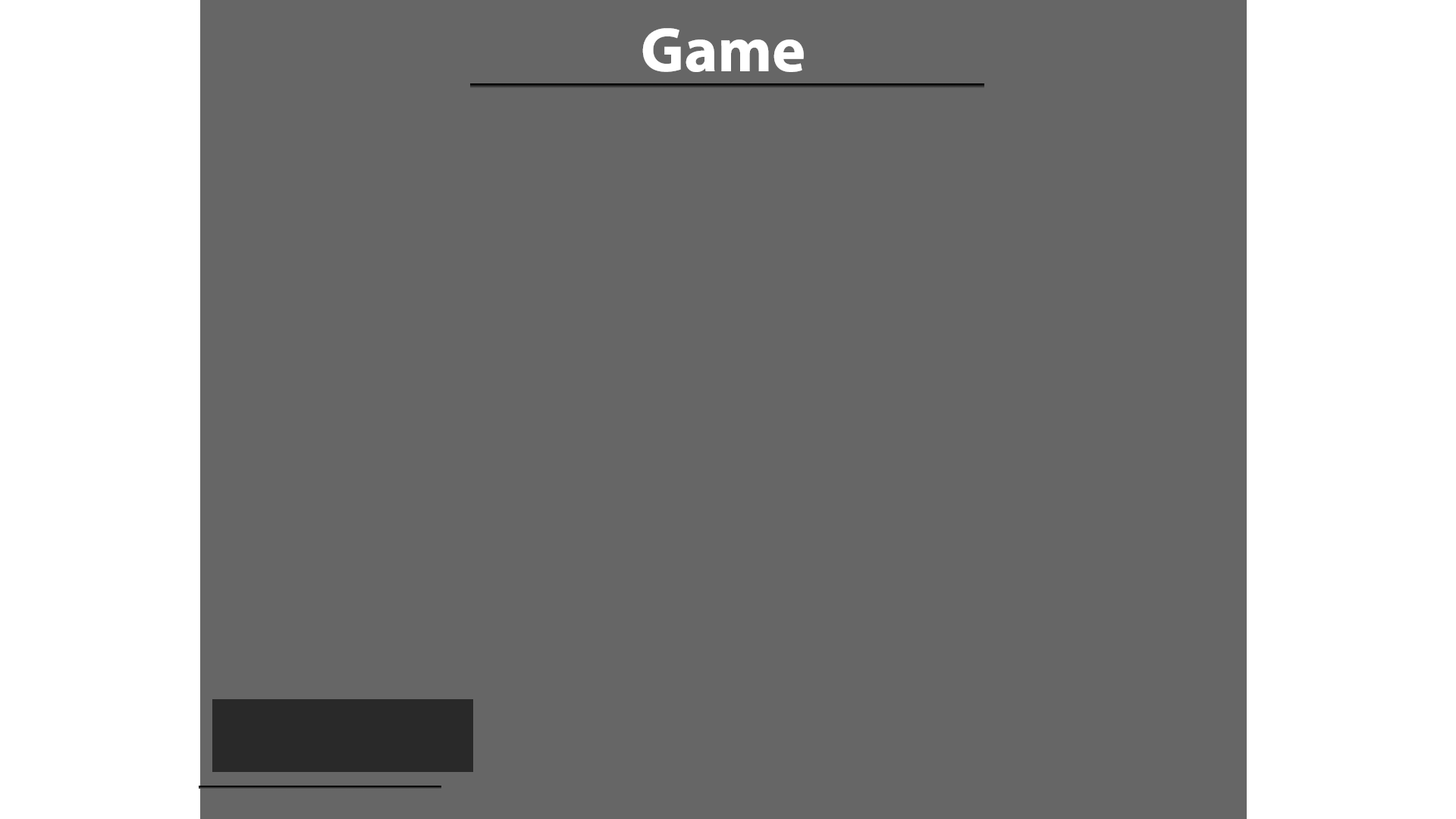
<style>
.page{position:relative;width:1456px;height:819px;background:#666666}
.page>*{position:absolute;margin:0}
.t1{font:63.2px "MyriadPro-Bold";color:#ffffff}
</style>
<div class="page">
<p class="t1" style="left:642px;top:28px;width:162px;height:44px">Game</p>
</div>
